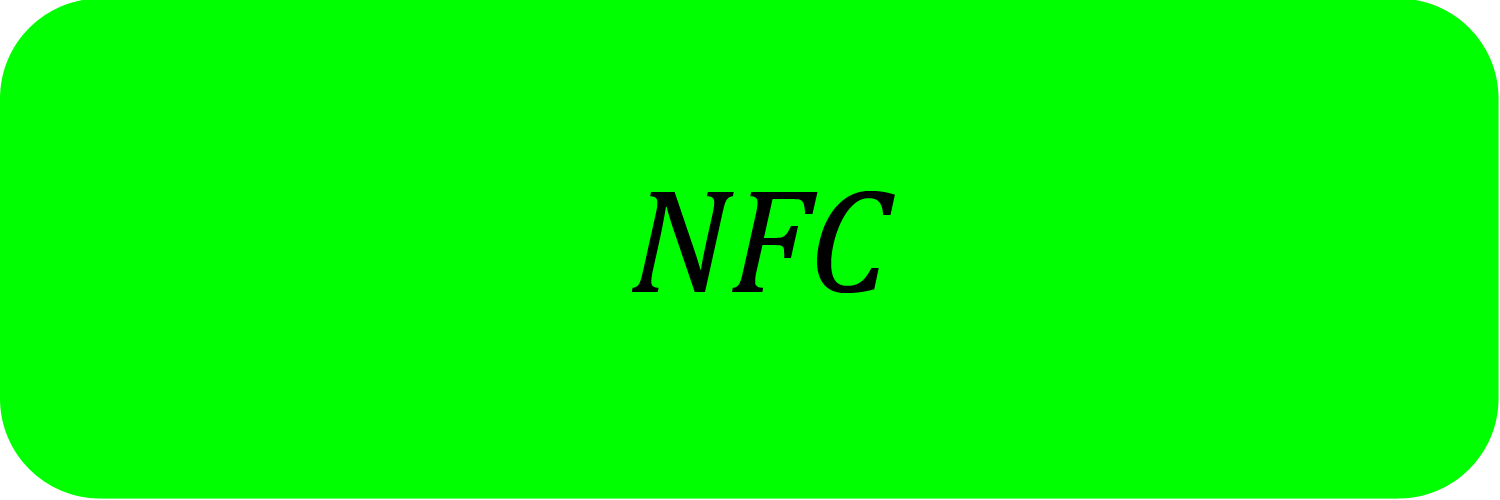
<style>
.page{position:relative;width:1500px;height:500px;background:#00ff00}
.page>*{position:absolute;margin:0}
.t1{font:150px "Cambria-Italic";color:#000000}
</style>
<div class="page">
<p class="t1" style="left:631px;top:191px;width:264px;height:102px">NFC</p>
</div>
